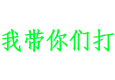
<style>
.page{position:relative;width:115px;height:80px;background:#ffffff}
.page>*{position:absolute;margin:0}
.t1{font:23.1px "AdobeFangsongStd-Regular";letter-spacing:-0.03em;color:#00ff2a;font-weight:bold}
</style>
<div class="page">
<p class="t1" style="left:1px;top:29px;width:114px;height:23px">我带你们打</p>
</div>
